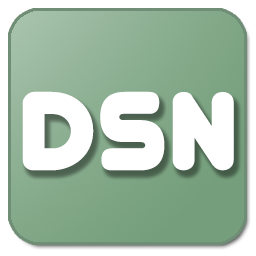
<style>
.page{position:relative;width:256px;height:256px;background:#ffffff}
.page>*{position:absolute;margin:0}
.t1{font:105px "YoureGone-Regular";color:#ffffff}
</style>
<div class="page">
<p class="t1" style="left:22px;top:91px;width:212px;height:80px">DSN</p>
</div>
